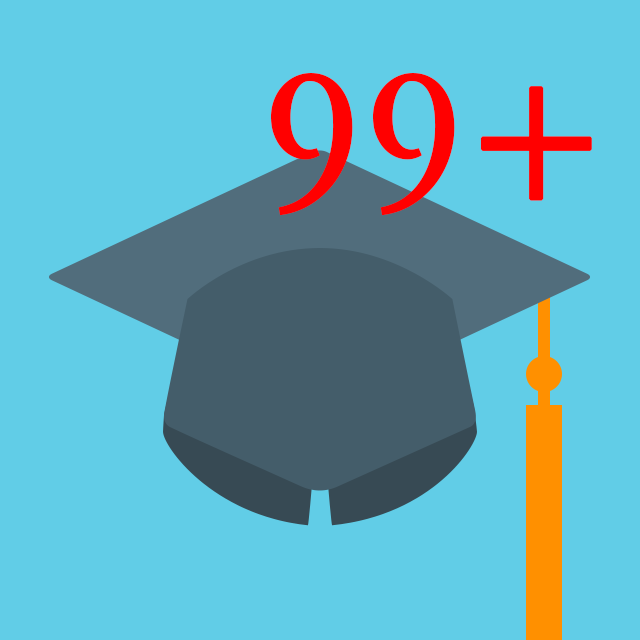
<style>
.page{position:relative;width:640px;height:640px;background:#61cde7}
.page>*{position:absolute;margin:0}
.t1{font:212.1px "STSongti-SC-Regular";color:#ff0000;font-weight:bold;scale:0.97 1}
</style>
<div class="page">
<p class="t1" style="left:270px;top:73px;width:322px;height:143px">99+</p>
</div>
